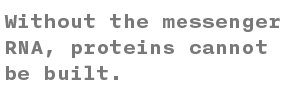
<style>
.page{position:relative;width:300px;height:100px;background:#ffffff}
.page>*{position:absolute;margin:0}
.t1{font:22px "NittiBasic-Bold";color:#797979}
</style>
<div class="page">
<p class="t1" style="left:4px;top:14px;width:276px;height:66px">Without the messenger RNA, proteins cannot be built.</p>
</div>
